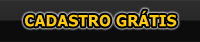
<style>
.page{position:relative;width:200px;height:42px;background:#0c0c0c}
.page>*{position:absolute;margin:0}
.t1{font:15.6px "Verdana-Bold";color:#ffcc00;scale:0.91 1}
</style>
<div class="page">
<p class="t1" style="left:25px;top:10px;width:152px;height:17px">CADASTRO GRÁTIS</p>
</div>
